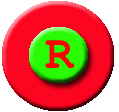
<style>
.page{position:relative;width:119px;height:112px;background:#fb0520}
.page>*{position:absolute;margin:0}
.t1{font:47.1px "CourierNewPS-BoldMT";color:#fc0202}
</style>
<div class="page">
<p class="t1" style="left:45px;top:40px;width:30px;height:28px">R</p>
</div>
